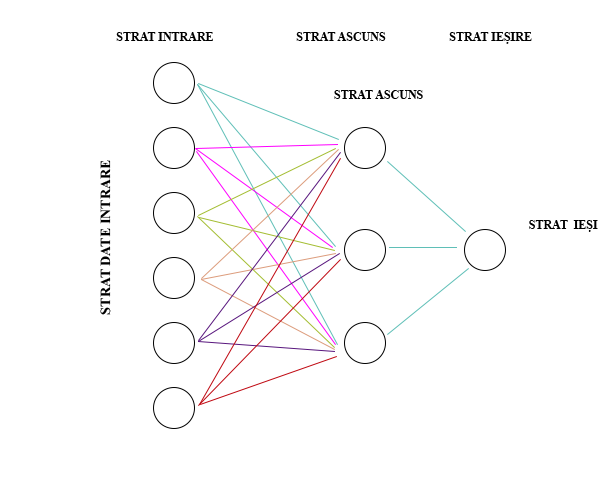
<style>
.page{position:relative;width:598px;height:500px;background:#ffffff}
.page>*{position:absolute;margin:0}
.t1{font:12px "TimesNewRomanPS-BoldMT";color:#000000}
.t2{font:14px "TimesNewRomanPS-BoldMT";color:#000000}
</style>
<div class="page">
<p class="t1" style="left:116px;top:32px;width:416px;height:12px">STRAT INTRARE             STRAT ASCUNS      STRAT IEȘIRE</p>
<p class="t1" style="left:334px;top:90px;width:89px;height:9px">STRAT ASCUNS</p>
<p class="t2" style="left:100px;top:160px;width:11px;height:155px;rotate:-90deg">STRAT DATE INTRARE</p>
</div>
